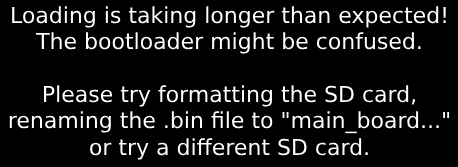
<style>
.page{position:relative;width:458px;height:167px;background:#000000}
.page>*{position:absolute;margin:0}
.t1{font:22px "SegoeUI";color:#ffffff}
</style>
<div class="page">
<p class="t1" style="left:9px;top:6px;width:441px;height:154px;text-align:center">Loading is taking longer than expected!<br>The bootloader might be confused.<br><br>Please try formatting the SD card, renaming the .bin file to "main_board..." or try a different SD card.</p>
</div>
